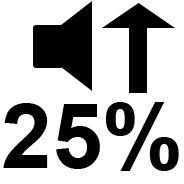
<style>
.page{position:relative;width:184px;height:184px;background:#ffffff}
.page>*{position:absolute;margin:0}
.t1{font:90.7px "Arial-BoldMT";color:#000000}
</style>
<div class="page">
<p class="t1" style="left:3px;top:102px;width:176px;height:69px">25%</p>
</div>
